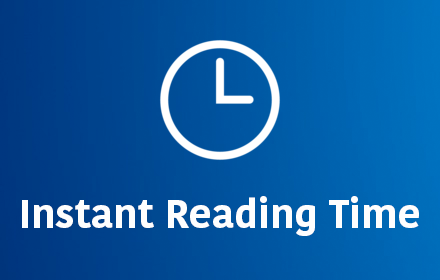
<style>
.page{position:relative;width:440px;height:280px}
.page>*{position:absolute;margin:0}
.t1{font:40px "KohinoorBangla-Bold";color:#fefefe}
</style>
<div class="page">
<p class="t1" style="left:22px;top:196px;width:397px;height:40px">Instant Reading Time</p>
</div>
